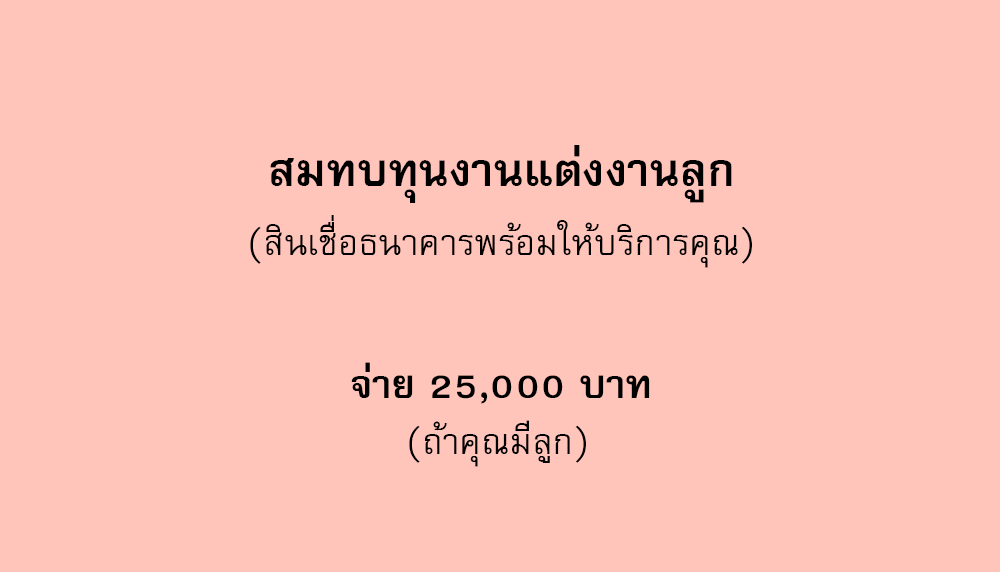
<style>
.page{position:relative;width:1000px;height:572px;background:#ffc4ba}
.page>*{position:absolute;margin:0}
.t1{font:64px "FreesiaUPCBold";color:#000000}
.t2{font:50px "FreesiaUPC";color:#000000}
.t3{font:56px "FreesiaUPCBold";color:#000000}
</style>
<div class="page">
<p class="t1" style="left:270px;top:145px;width:462px;height:58px">สมทบทุนงานแต่งงานลูก</p>
<p class="t2" style="left:250px;top:215px;width:502px;height:53px">(สินเชื่อธนาคารพร้อมให้บริการคุณ)</p>
<p class="t3" style="left:351px;top:362px;width:299px;height:42px">จ่าย 25,000 บาท</p>
<p class="t2" style="left:409px;top:420px;width:177px;height:47px">(ถ้าคุณมีลูก)</p>
</div>
